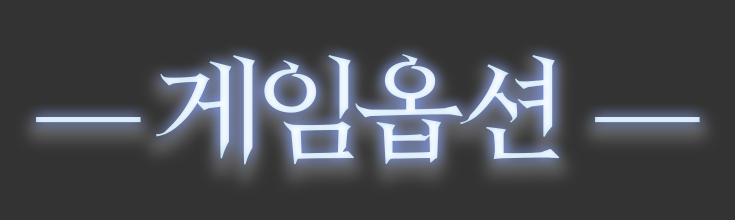
<style>
.page{position:relative;width:735px;height:220px;background:#333333}
.page>*{position:absolute;margin:0}
.t1{font:110px "HeirofLightRegular";letter-spacing:-0.1em;color:#e4f2fc;scale:1.03 1}
</style>
<div class="page">
<p class="t1" style="left:36px;top:54px;width:664px;height:111px">― 게임옵션  ―</p>
</div>
